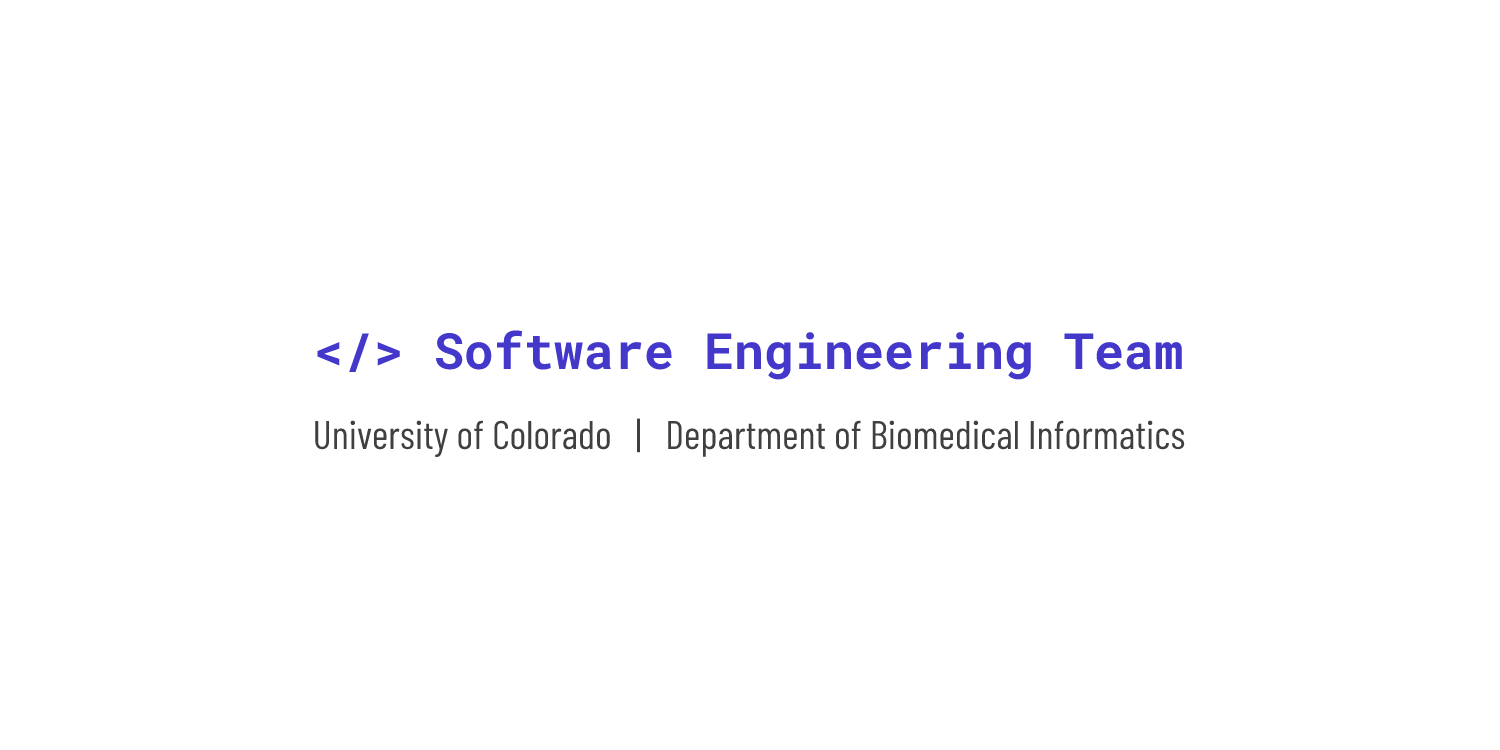
<style>
.page{position:relative;width:1500px;height:750px;background:#ffffff}
.page>*{position:absolute;margin:0}
.t1{font:50px "RobotoMono-Bold";color:#4338ca}
.t2{font:40px "BarlowCondensed-Regular";color:#404040}
</style>
<div class="page">
<p class="t1" style="left:317px;top:330px;width:865px;height:50px">&lt;/&gt; Software Engineering Team</p>
<p class="t2" style="left:315px;top:418px;width:870px;height:39px">University of Colorado   |   Department of Biomedical Informatics</p>
</div>
